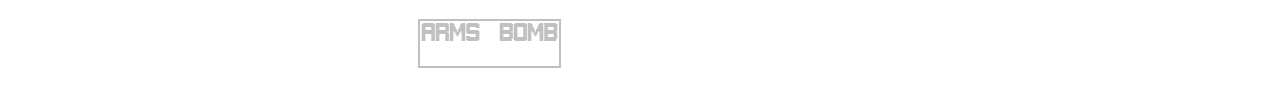
<style>
.page{position:relative;width:1280px;height:100px;background:#ffffff}
.page>*{position:absolute;margin:0}
.t1{font:18.7px "Gameplay";color:#c2bfbf}
</style>
<div class="page">
<p class="t1" style="left:421px;top:23px;width:59px;height:18px">ARMS</p>
<p class="t1" style="left:499px;top:23px;width:59px;height:18px">BOMB</p>
</div>
